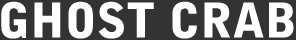
<style>
.page{position:relative;width:296px;height:40px;background:#333333}
.page>*{position:absolute;margin:0}
.t1{font:47.5px "BellGothicStd-Black";color:#ffffff}
</style>
<div class="page">
<p class="t1" style="left:1px;top:1px;width:293px;height:38px">GHOST CRAB</p>
</div>
